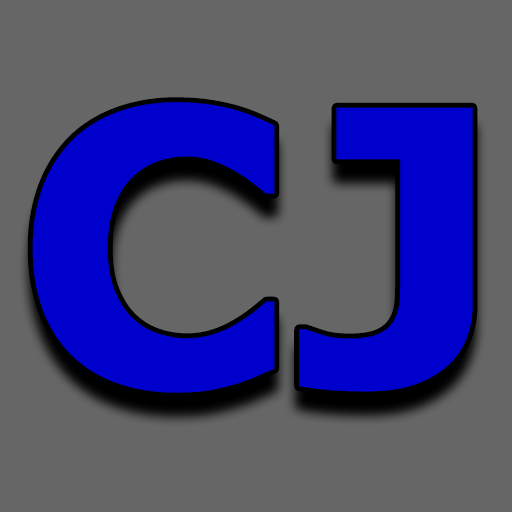
<style>
.page{position:relative;width:512px;height:512px;background:#666666}
.page>*{position:absolute;margin:0}
.t1{font:384px "Verdana-Bold";color:#0000cc}
</style>
<div class="page">
<p class="t1" style="left:32px;top:102px;width:441px;height:291px">CJ</p>
</div>
